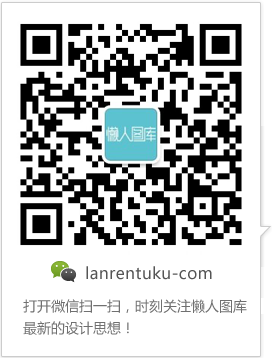
<style>
.page{position:relative;width:272px;height:358px;background:#ffffff}
.page>*{position:absolute;margin:0}
.t1{font:16px "MicrosoftYaHei";letter-spacing:0.025em;color:#555555}
.t2{font:14px/22px "MicrosoftYaHei";color:#707070}
</style>
<div class="page">
<p class="t1" style="left:86px;top:266px;width:126px;height:14px">lanrentuku-com</p>
<p class="t2" style="left:23px;top:299px;width:224px;height:36px">打开微信扫一扫，时刻关注懒人图库<br>最新的设计思想！</p>
</div>
